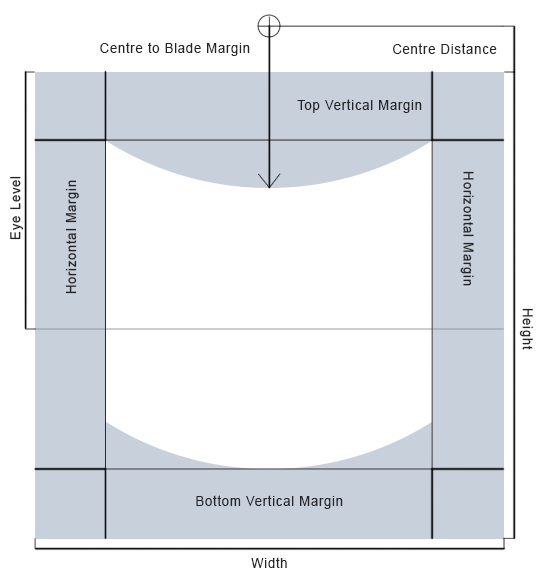
<style>
.page{position:relative;width:542px;height:579px;background:#ffffff}
.page>*{position:absolute;margin:0}
.t1{font:14px "ArialMT";letter-spacing:0.06em;color:#232426;scale:0.93 1}
</style>
<div class="page">
<p class="t1" style="left:100px;top:42px;width:150px;height:14px">Centre to Blade Margin</p>
<p class="t1" style="left:393px;top:43px;width:104px;height:11px">Centre Distance</p>
<p class="t1" style="left:297px;top:99px;width:125px;height:14px">Top Vertical Margin</p>
<p class="t1" style="left:460px;top:171px;width:14px;height:115px;rotate:90deg">Horizontal Margin</p>
<p class="t1" style="left:10px;top:176px;width:14px;height:64px;rotate:-90deg">Eye Level</p>
<p class="t1" style="left:65px;top:180px;width:14px;height:114px;rotate:-90deg">Horizontal Margin</p>
<p class="t1" style="left:519px;top:308px;width:14px;height:42px;rotate:90deg">Height</p>
<p class="t1" style="left:196px;top:495px;width:147px;height:14px">Bottom Vertical Margin</p>
<p class="t1" style="left:251px;top:557px;width:36px;height:11px">Width</p>
</div>
